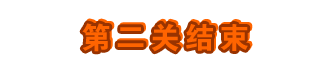
<style>
.page{position:relative;width:331px;height:74px;background:#ffffff}
.page>*{position:absolute;margin:0}
.t1{font:30px "Jdahei";letter-spacing:0.15em;color:#ff6400}
</style>
<div class="page">
<p class="t1" style="left:82px;top:23px;width:166px;height:29px">第二关结束</p>
</div>
